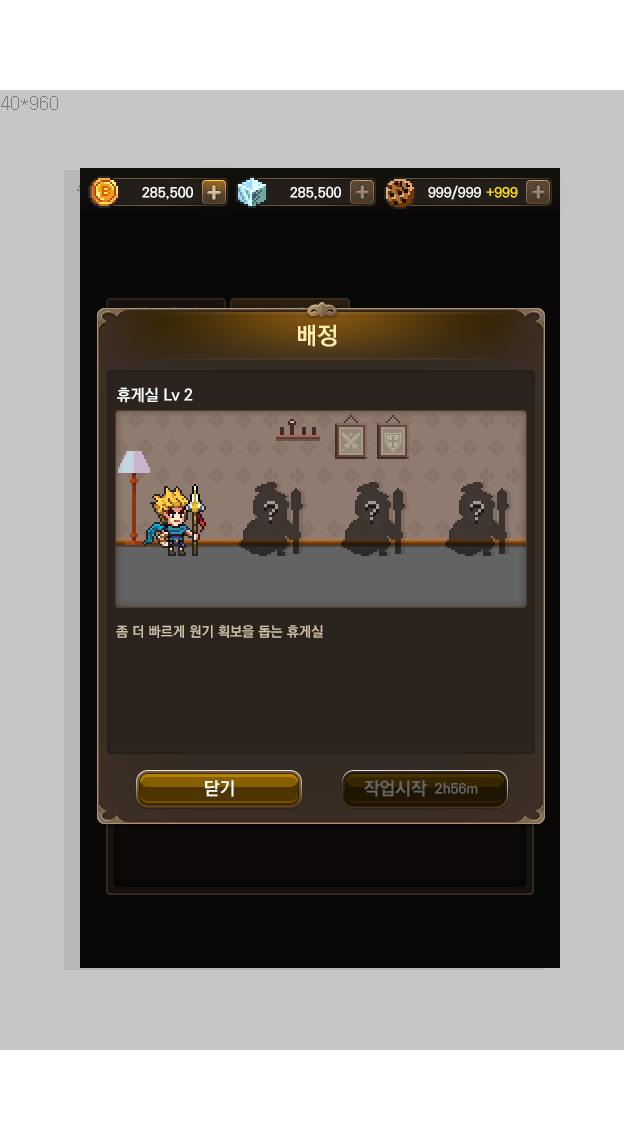
<style>
.page{position:relative;width:640px;height:1136px;background:#c6c6c6}
.page>*{position:absolute;margin:0}
.t1{font:24px "KoPubDotumBold";color:#ffedab}
.t2{font:16px "KoPubDotumBold";color:#ffffff}
.t3{font:24px "VolterGoldfish";color:#9e9b99}
.t4{font:14px "KoPubDotumBold";color:#d0c0a7}
.t5{font:18px "KoPubDotumBold";color:#ffffff}
.t6{font:18px "KoPubDotumBold";color:#666666}
.t7{font:14px "KoPubDotumBold";color:#666666}
</style>
<div class="page">
<p class="t1" style="left:298px;top:324px;width:39px;height:23px">배정</p>
<p class="t2" style="left:117px;top:387px;width:76px;height:16px">휴게실 Lv 2</p>
<p class="t3" style="left:264px;top:501px;width:14px;height:19px">?</p>
<p class="t3" style="left:365px;top:501px;width:14px;height:19px">?</p>
<p class="t3" style="left:470px;top:501px;width:14px;height:19px">?</p>
<p class="t4" style="left:116px;top:625px;width:207px;height:13px">좀 더 빠르게 원기 획보을 돕는 휴게실</p>
<p class="t5" style="left:205px;top:780px;width:29px;height:17px">닫기</p>
<p class="t6" style="left:364px;top:780px;width:63px;height:17px">작업시작</p>
<p class="t7" style="left:435px;top:782px;width:43px;height:12px">2h56m</p>
</div>
